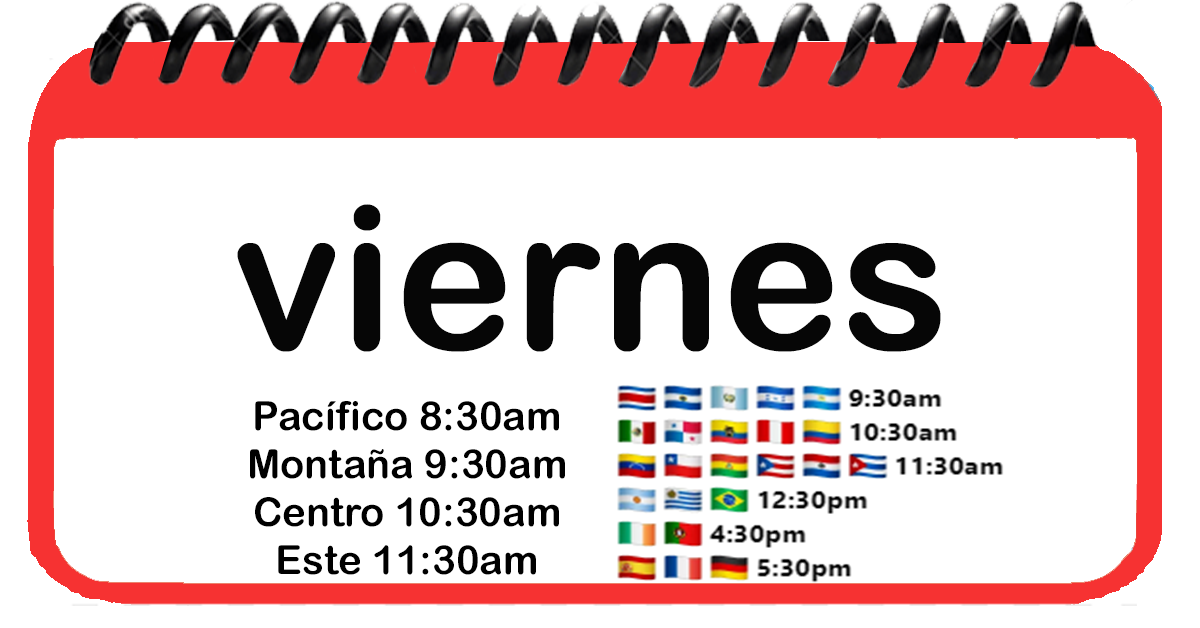
<style>
.page{position:relative;width:1200px;height:628px;background:#ffffff}
.page>*{position:absolute;margin:0}
.t1{font:200px "ArialRoundedMTBold";color:#060606}
.t2{font:40px "ArialRoundedMTBold";color:#000000}
</style>
<div class="page">
<p class="t1" style="left:237px;top:204px;width:704px;height:148px">viernes</p>
<p class="t2" style="left:250px;top:401px;width:315px;height:174px;text-align:center">Pacífico 8:30am<br>Montaña 9:30am<br>Centro 10:30am<br>Este 11:30am</p>
</div>
